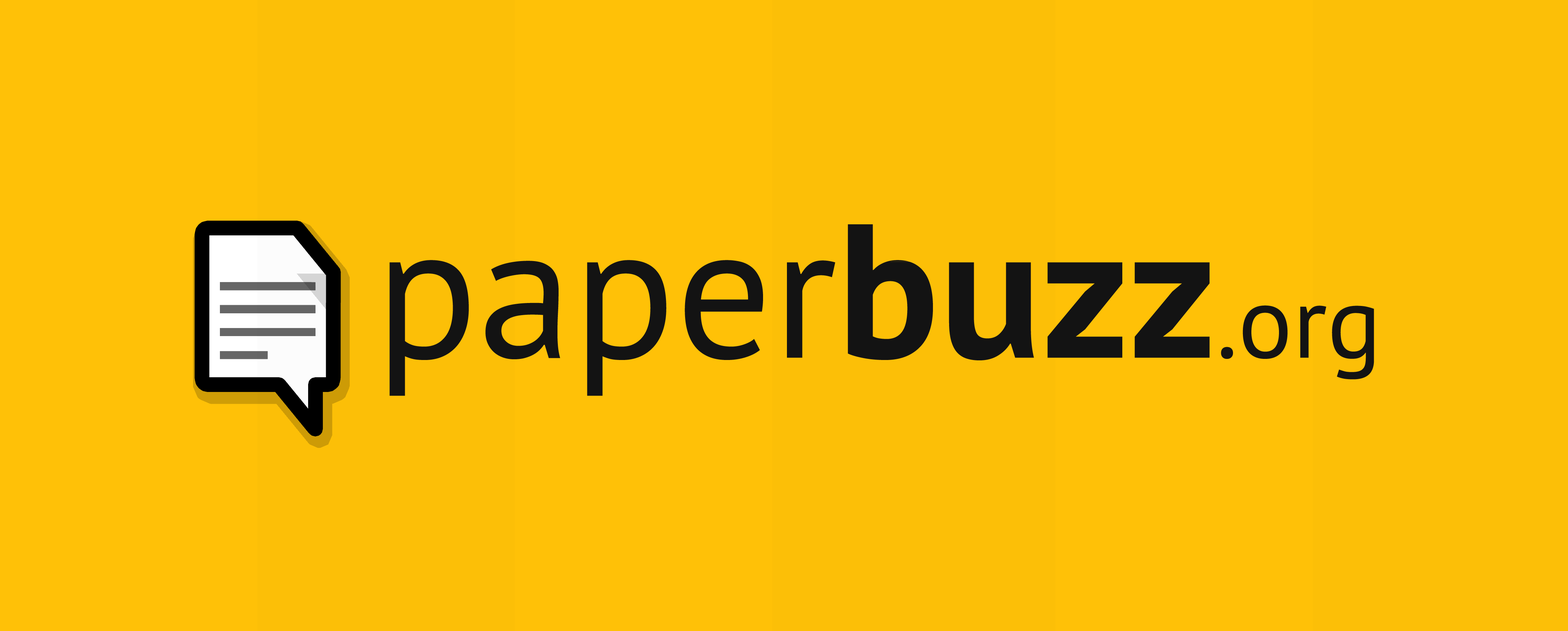
<style>
.page{position:relative;width:1568px;height:631px;background:#ffc107}
.page>*{position:absolute;margin:0}
.t1{font:190.5px "PTSans-Regular";color:#131313}
.t2{font:190.5px "PTSans-Bold";color:#131313}
.t3{font:101.8px "PTSans-Regular";color:#131313}
</style>
<div class="page">
<p class="t1" style="left:389px;top:224px;width:985px;height:172px">paper<span class="t2">buzz</span><span class="t3">.org</span></p>
</div>
